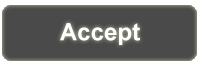
<style>
.page{position:relative;width:200px;height:67px;background:#4a4a4a}
.page>*{position:absolute;margin:0}
.t1{font:24px "Arial-BoldMT";color:#ffffff}
</style>
<div class="page">
<p class="t1" style="left:60px;top:23px;width:80px;height:22px">Accept</p>
</div>
